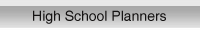
<style>
.page{position:relative;width:200px;height:30px}
.page>*{position:absolute;margin:0}
.t1{font:24px "Helvetica";color:#151313}
</style>
<div class="page">
<p class="t1" style="left:33px;top:10px;width:133px;height:14px">High School Planners</p>
<p class="t1" style="left:33px;top:10px;width:133px;height:14px">High School Planners</p>
</div>
